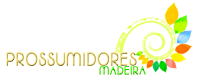
<style>
.page{position:relative;width:200px;height:78px;background:#ffffff}
.page>*{position:absolute;margin:0}
.t1{font:17.9px "Moonbeam";letter-spacing:0.1em;font-weight:bold;scale:0.81 1}
.t2{font:11.2px "Moonbeam";letter-spacing:0.1em;font-weight:bold;scale:0.86 1}
</style>
<div class="page">
<p class="t1" style="left:6px;top:52px;width:131px;height:14px">PROSSUMIDORES</p>
<p class="t2" style="left:99px;top:65px;width:47px;height:10px">MADEIRA</p>
</div>
